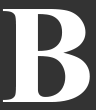
<style>
.page{position:relative;width:96px;height:110px;background:#333333}
.page>*{position:absolute;margin:0}
.t1{font:141.2px "TimesNewRomanPS-BoldMT";color:#ffffff}
</style>
<div class="page">
<p class="t1" style="left:2px;top:9px;width:88px;height:93px">B</p>
</div>
